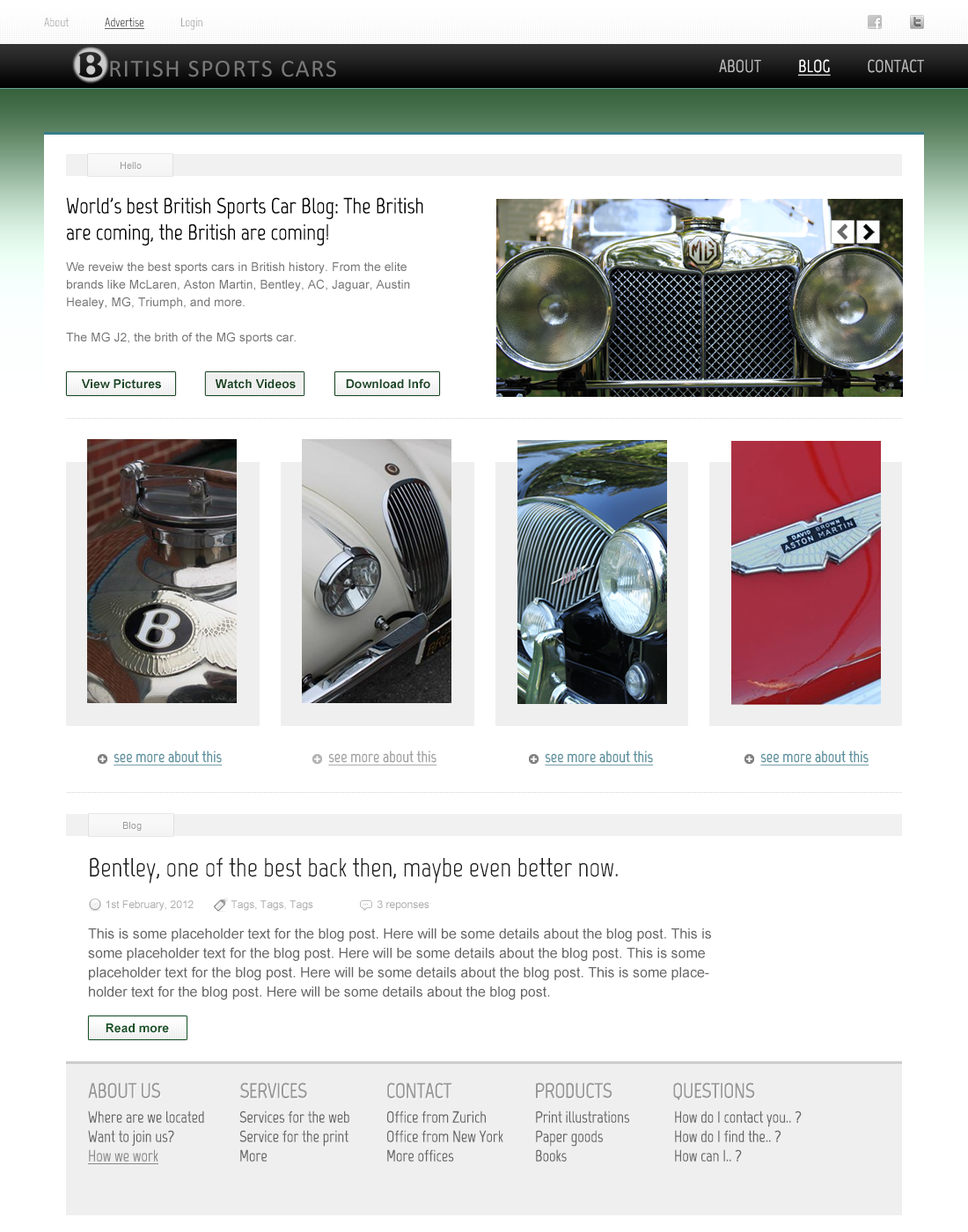
<style>
.page{position:relative;width:968px;height:1232px;background:#ffffff}
.page>*{position:absolute;margin:0}
.t1{font:12.3px "Marvel-Regular";color:#000000;text-decoration:underline}
.t2{font:12.3px "Marvel-Regular";color:#a0a0a0}
.t3{font:17.6px "Marvel-Regular";color:#b9b9b9;text-transform:uppercase}
.t4{font:17.6px "Marvel-Regular";color:#ffffff;text-transform:uppercase;text-decoration:underline}
.t5{font:9.7px "ArialMT";color:#999999}
.t6{font:22px/26.4px "Marvel-Regular";color:#050505}
.t7{font:12.3px/17.6px "ArialMT";color:#777777}
.t8{font:12.3px "Arial-BoldMT";color:#194624}
.t9{font:15.8px "Marvel-Bold";color:#558d9a;text-decoration:underline}
.t10{font:15.8px "Marvel-Bold";color:#929292;text-decoration:underline}
.t11{font:26.4px "Marvel-Regular";color:#1d1d1d}
.t12{font:10.6px "ArialMT";color:#aaaaaa}
.t13{font:14.1px/19.4px "ArialMT";color:#676767}
.t14{font:12.3px "Arial-BoldMT";color:#155024}
.t15{font:21.1px "Marvel-Bold";letter-spacing:-0.025em;color:#999999}
.t16{font:15.8px/19.4px "Marvel-Regular";color:#656565}
.t17{font:15.8px/19.4px "Marvel-Regular";color:#898989;text-decoration:underline}
</style>
<div class="page">
<p class="t1" style="left:44px;top:18px;width:158px;height:12px"><span class="t2">About              </span>Advertise<span class="t2">              Login</span></p>
<p class="t3" style="left:719px;top:59px;width:205px;height:17px">About          <span class="t4">BLOG</span>          CONTACT</p>
<p class="t5" style="left:121px;top:162px;width:21px;height:7px">Hello</p>
<p class="t6" style="left:66px;top:197px;width:357px;height:49px">World's best British Sports Car Blog: The British are coming, the British are coming!</p>
<p class="t7" style="left:66px;top:262px;width:344px;height:82px">We reveiw the best sports cars in British history. From the elite brands like McLaren, Aston Martin, Bentley, AC, Jaguar, Austin Healey, MG, Triumph, and more.<br><br>The MG J2, the brith of the MG sports car.</p>
<p class="t8" style="left:81px;top:379px;width:80px;height:10px">View Pictures</p>
<p class="t8" style="left:215px;top:379px;width:81px;height:10px">Watch Videos</p>
<p class="t8" style="left:346px;top:378px;width:84px;height:11px">Download Info</p>
<p class="t9" style="left:114px;top:751px;width:109px;height:15px">see more about this</p>
<p class="t10" style="left:328px;top:751px;width:109px;height:15px;opacity:0.9">see more about this</p>
<p class="t9" style="left:545px;top:751px;width:109px;height:15px">see more about this</p>
<p class="t9" style="left:760px;top:751px;width:109px;height:15px">see more about this</p>
<p class="t5" style="left:123px;top:822px;width:19px;height:10px">Blog</p>
<p class="t11" style="left:90px;top:857px;width:528px;height:26px">Bentley, one of the best back then, maybe even better now.</p>
<p class="t12" style="left:106px;top:900px;width:88px;height:11px">1st February, 2012</p>
<p class="t12" style="left:231px;top:900px;width:82px;height:11px">Tags, Tags, Tags</p>
<p class="t12" style="left:377px;top:900px;width:52px;height:11px">3 reponses</p>
<p class="t13" style="left:88px;top:927px;width:623px;height:73px">This is some placeholder text for the blog post. Here will be some details about the blog post. This is some placeholder text for the blog post. Here will be some details about the blog post. This is some placeholder text for the blog post. Here will be some details about the blog post. This is some placeholder text for the blog post. Here will be some details about the blog post.</p>
<p class="t14" style="left:106px;top:1023px;width:63px;height:10px">Read more</p>
<p class="t15" style="left:88px;top:1082px;width:667px;height:19px">ABOUT US                     SERVICES                     CONTACT                      PRODUCTS                QUESTIONS</p>
<p class="t16" style="left:88px;top:1110px;width:116px;height:54px">Where are we located<br>Want to join us?<br><span class="t17">How we work</span></p>
<p class="t16" style="left:239px;top:1110px;width:110px;height:52px">Services for the web<br>Service for the print<br>More</p>
<p class="t16" style="left:387px;top:1110px;width:116px;height:52px">Office from Zurich<br>Office from New York<br>More offices</p>
<p class="t16" style="left:536px;top:1110px;width:94px;height:52px">Print illustrations<br>Paper goods<br>Books</p>
<p class="t16" style="left:675px;top:1110px;width:127px;height:52px">How do I contact you.. ?<br>How do I find the.. ?<br>How can I.. ?</p>
</div>
